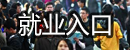
<style>
.page{position:relative;width:130px;height:50px}
.page>*{position:absolute;margin:0}
.t1{font:23.8px "MicrosoftYaHei";color:#ffffff}
</style>
<div class="page">
<p class="t1" style="left:18px;top:13px;width:93px;height:24px">就业入口</p>
</div>
